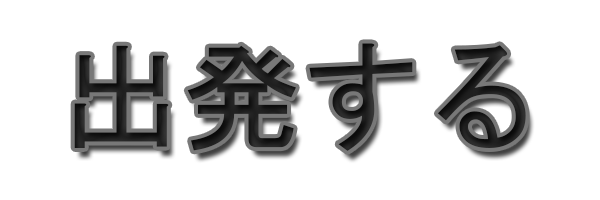
<style>
.page{position:relative;width:600px;height:200px;background:#ffffff}
.page>*{position:absolute;margin:0}
.t1{font:120px "MS-Gothic";color:#1d1d1d}
</style>
<div class="page">
<p class="t1" style="left:74px;top:43px;width:452px;height:108px">出発する</p>
</div>
